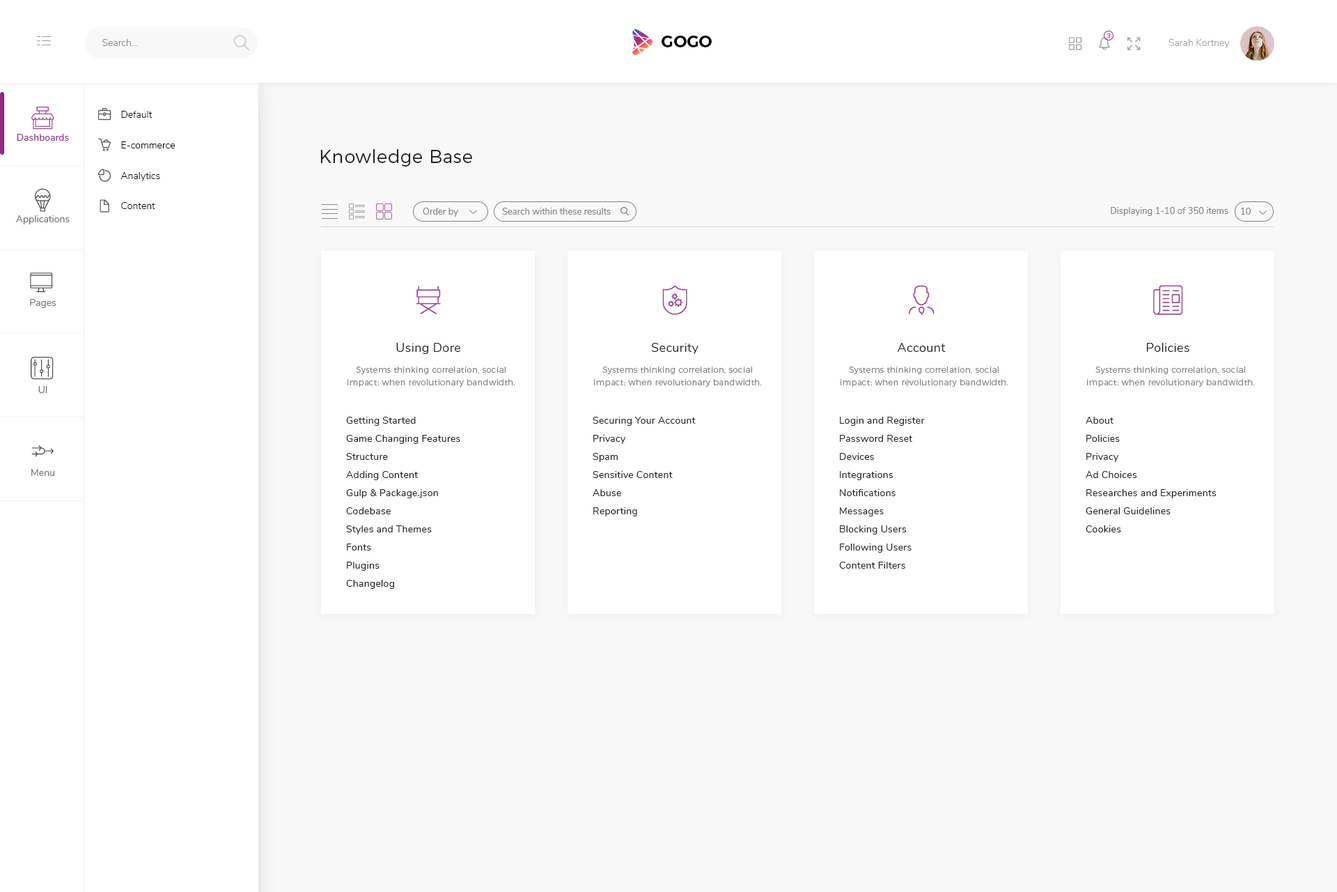
<style>
.page{position:relative;width:1337px;height:892px;background:#ffffff}
.page>*{position:absolute;margin:0}
.t1{font:9.8px "Nunito-Light";color:#898989}
.t2{font:16.7px "Montserrat-SemiBold";color:#000000}
.t3{font:6.3px "Nunito-Regular";letter-spacing:0.02em;color:#98418f}
.t4{font:9.8px "Nunito-Light";color:#a0a0a0}
.t5{font:9.8px "Nunito-Light";color:#000000}
.t6{font:9.8px "Nunito-Regular";color:#922c88}
.t7{font:18.1px "Montserrat-Light";letter-spacing:0.02em;color:#212121}
.t8{font:9.1px "Nunito-Regular";color:#828282}
.t9{font:9.8px "Nunito-Regular";color:#737373}
.t10{font:12.5px "Nunito-Regular";letter-spacing:0.02em;color:#212121}
.t11{font:8.4px/12.5px "Montserrat-Light";letter-spacing:0.02em;color:#858585}
.t12{font:9.8px/18.1px "Nunito-Regular";letter-spacing:0.02em;color:#212121}
</style>
<div class="page">
<p class="t1" style="left:102px;top:39px;width:36px;height:7px">Search...</p>
<p class="t2" style="left:662px;top:36px;width:50px;height:11px">GOGO</p>
<p class="t3" style="left:1108px;top:33px;width:3px;height:5px">3</p>
<p class="t4" style="left:1169px;top:39px;width:61px;height:9px">Sarah Kortney</p>
<p class="t5" style="left:121px;top:111px;width:32px;height:7px">Default</p>
<p class="t6" style="left:17px;top:134px;width:52px;height:7px">Dashboards</p>
<p class="t5" style="left:121px;top:141px;width:55px;height:7px">E-commerce</p>
<p class="t7" style="left:320px;top:149px;width:152px;height:17px">Knowledge Base</p>
<p class="t5" style="left:121px;top:172px;width:39px;height:9px">Analytics</p>
<p class="t5" style="left:121px;top:202px;width:34px;height:7px">Content</p>
<p class="t8" style="left:423px;top:208px;width:35px;height:9px">Order by</p>
<p class="t8" style="left:502px;top:208px;width:109px;height:7px">Search within these results</p>
<p class="t8" style="left:1111px;top:207px;width:118px;height:9px">Displaying 1-10 of 350 items</p>
<p class="t8" style="left:1241px;top:208px;width:10px;height:7px">10</p>
<p class="t9" style="left:16px;top:215px;width:54px;height:9px">Applications</p>
<p class="t9" style="left:30px;top:299px;width:26px;height:9px">Pages</p>
<p class="t10" style="left:396px;top:343px;width:64px;height:11px">Using Dore</p>
<p class="t10" style="left:651px;top:343px;width:48px;height:11px">Security</p>
<p class="t10" style="left:898px;top:343px;width:48px;height:9px">Account</p>
<p class="t10" style="left:1147px;top:343px;width:43px;height:9px">Policies</p>
<p class="t11" style="left:348px;top:366px;width:167px;height:21px;text-align:center">Systems thinking correlation, social impact; when revolutionary bandwidth.</p>
<p class="t11" style="left:594px;top:366px;width:168px;height:21px;text-align:center">Systems thinking correlation, social impact; when revolutionary bandwidth.</p>
<p class="t11" style="left:841px;top:366px;width:168px;height:21px;text-align:center">Systems thinking correlation, social impact; when revolutionary bandwidth.</p>
<p class="t11" style="left:1087px;top:366px;width:168px;height:21px;text-align:center">Systems thinking correlation, social impact; when revolutionary bandwidth.</p>
<p class="t9" style="left:38px;top:386px;width:9px;height:7px">UI</p>
<p class="t12" style="left:346px;top:417px;width:114px;height:172px">Getting Started<br>Game Changing Features<br>Structure<br>Adding Content<br>Gulp &amp; Package.json<br>Codebase<br>Styles and Themes<br>Fonts<br>Plugins<br>Changelog</p>
<p class="t12" style="left:593px;top:417px;width:103px;height:99px">Securing Your Account<br>Privacy<br>Spam<br>Sensitive Content<br>Abuse<br>Reporting</p>
<p class="t12" style="left:839px;top:417px;width:86px;height:151px">Login and Register<br>Password Reset<br>Devices<br>Integrations<br>Notifications<br>Messages<br>Blocking Users<br>Following Users<br>Content Filters</p>
<p class="t12" style="left:1086px;top:417px;width:131px;height:115px">About<br>Policies<br>Privacy<br>Ad Choices<br>Researches and Experiments<br>General Guidelines<br>Cookies</p>
<p class="t9" style="left:31px;top:469px;width:24px;height:7px">Menu</p>
</div>
